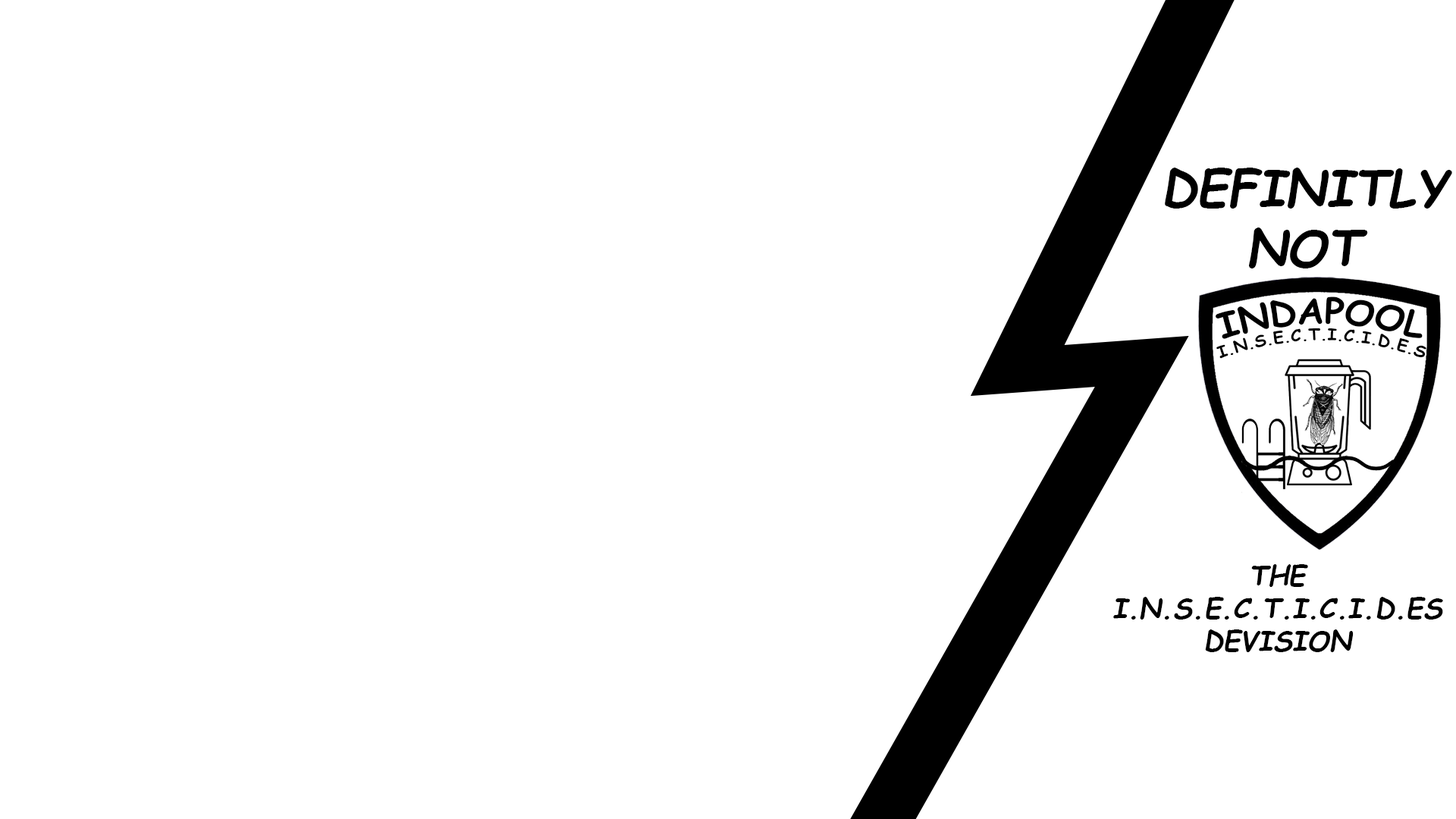
<style>
.page{position:relative;width:1456px;height:819px;background:#ffffff}
.page>*{position:absolute;margin:0}
.t1{font:50px "ComicSansMS-BoldItalic";color:#000000}
.t2{font:35px "ComicSansMS-Bold";color:#000000}
.t3{font:16px "ComicSansMS-Bold";color:#000000}
.t4{font:27.3px "ComicSansMS-BoldItalic";color:#000000}
</style>
<div class="page">
<p class="t1" style="left:1165px;top:168px;width:287px;height:100px;text-align:center">DEFINITLY<br>NOT</p>
<p class="t2" style="left:1216px;top:297px;width:207px;height:42px">INDAPOOL</p>
<p class="t3" style="left:1216px;top:328px;width:210px;height:31px;text-align:center">I.N.S.E.C.T.I.C.I.D.E.S</p>
<p class="t4" style="left:1113px;top:564px;width:330px;height:88px;text-align:center">THE I.N.S.E.C.T.I.C.I.D.ES<br>DEVISION</p>
</div>
